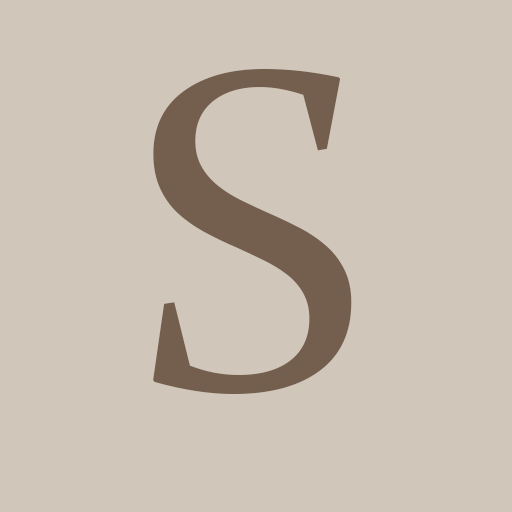
<style>
.page{position:relative;width:512px;height:512px;background:#d0c6ba}
.page>*{position:absolute;margin:0}
.t1{font:459.4px "Constantia";color:#745e4d}
</style>
<div class="page">
<p class="t1" style="left:153px;top:69px;width:199px;height:325px">S</p>
</div>
